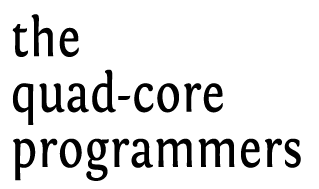
<style>
.page{position:relative;width:319px;height:189px;background:#ffffff}
.page>*{position:absolute;margin:0}
.t1{font:54.9px "Fontin-Regular";color:#000000;font-weight:bold;scale:0.84 1}
</style>
<div class="page">
<p class="t1" style="left:12px;top:14px;width:289px;height:167px">the<br>quad-core<br>programmers</p>
</div>
